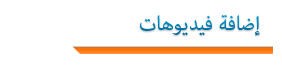
<style>
.page{position:relative;width:282px;height:69px;background:#ffffff}
.page>*{position:absolute;margin:0}
.t1{font:28px "AdobeArabic-Regular";color:#0079ac}
</style>
<div class="page">
<p class="t1" style="left:140px;top:15px;width:120px;height:21px">إضافة فيديوهات</p>
</div>
